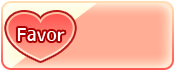
<style>
.page{position:relative;width:176px;height:72px;background:#ffad94}
.page>*{position:absolute;margin:0}
.t1{font:18px "JK-Gothic-M";color:#ffffff}
</style>
<div class="page">
<p class="t1" style="left:17px;top:28px;width:48px;height:14px">Favor</p>
</div>
